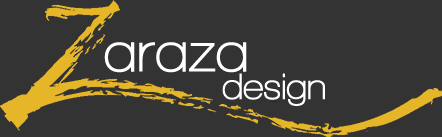
<style>
.page{position:relative;width:442px;height:137px;background:#333333}
.page>*{position:absolute;margin:0}
.t1{font:58.3px "WalkwayBold";color:#ffffff}
.t2{font:37.5px "WalkwayBold";color:#ffffff}
</style>
<div class="page">
<p class="t1" style="left:104px;top:42px;width:143px;height:31px">araza</p>
<p class="t2" style="left:222px;top:73px;width:103px;height:33px">design</p>
</div>
